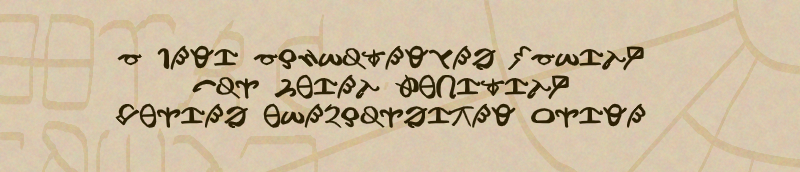
<style>
.page{position:relative;width:800px;height:172px}
.page>*{position:absolute;margin:0}
.t1{font:24px "ProtobeshCoremaic";color:#1a1503}
</style>
<div class="page">
<p class="t1" style="left:115px;top:45px;width:531px;height:84px;text-align:center">a jedi acknoledges vanity<br>for quiet humility<br>buries unexcorsized pride</p>
</div>
